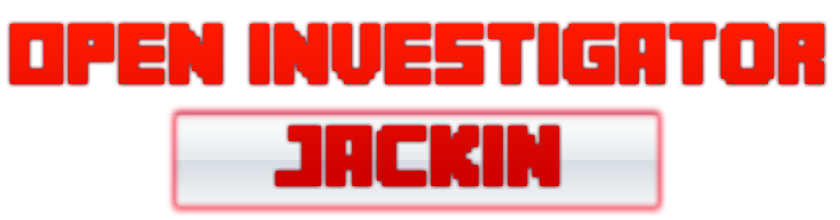
<style>
.page{position:relative;width:840px;height:220px;background:#ffffff}
.page>*{position:absolute;margin:0}
.t1{font:60px/34px "MineCrafter-3";color:#f51500}
</style>
<div class="page">
<p class="t1" style="left:10px;top:24px;width:814px;height:162px;text-align:center">Open Investigator<br><br><br>JackIN</p>
</div>
